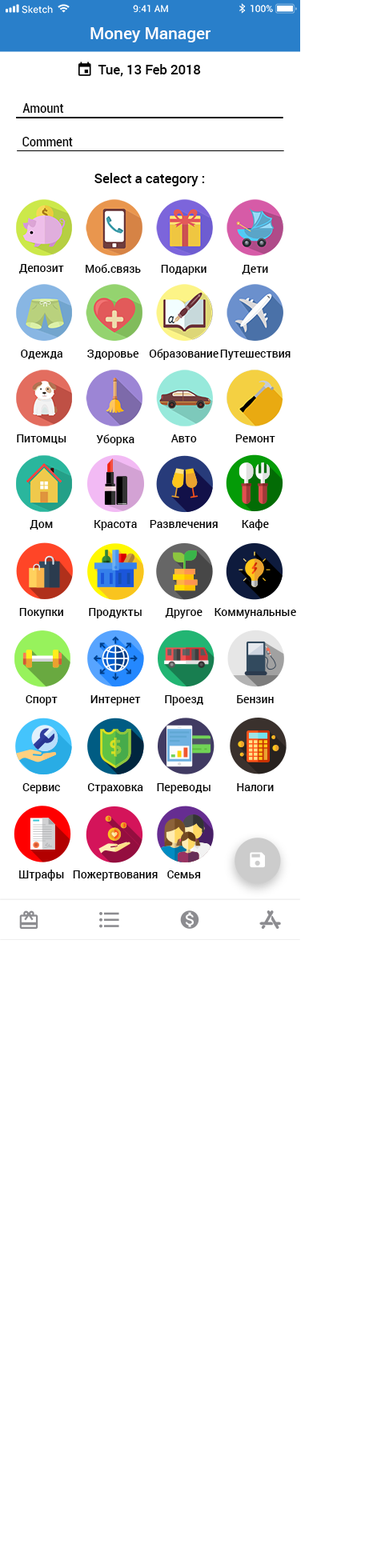
<style>
.page{position:relative;width:381px;height:1568px;background:#ffffff}
.page>*{position:absolute;margin:0}
.t1{font:16.7px "Roboto-Medium";color:#ffffff}
.t2{font:13.3px "Roboto-Medium";color:#000000}
.t3{font:13.3px "Roboto-Condensed";color:#000000}
.t4{font:11.2px "Roboto-Medium";color:#000000}
</style>
<div class="page">
<p class="t1" style="left:90px;top:27px;width:121px;height:15px">Money Manager</p>
<p class="t2" style="left:98px;top:64px;width:103px;height:13px">Тue, 13 Feb 2018</p>
<p class="t3" style="left:22px;top:103px;width:42px;height:10px">Amount</p>
<p class="t3" style="left:22px;top:137px;width:51px;height:9px">Comment</p>
<p class="t2" style="left:94px;top:173px;width:111px;height:13px">Select a category :</p>
<p class="t4" style="left:18px;top:264px;width:46px;height:10px">Депозит</p>
<p class="t4" style="left:86px;top:264px;width:55px;height:9px">Моб.связь</p>
<p class="t4" style="left:161px;top:265px;width:45px;height:10px">Подарки</p>
<p class="t4" style="left:242px;top:265px;width:26px;height:9px">Дети</p>
<p class="t4" style="left:21px;top:350px;width:41px;height:9px">Одежда</p>
<p class="t4" style="left:87px;top:350px;width:52px;height:10px">Здоровье</p>
<p class="t4" style="left:149px;top:349px;width:69px;height:11px">Образование</p>
<p class="t4" style="left:220px;top:350px;width:70px;height:10px">Путешествия</p>
<p class="t4" style="left:17px;top:434px;width:49px;height:10px">Питомцы</p>
<p class="t4" style="left:96px;top:434px;width:38px;height:12px">Уборка</p>
<p class="t4" style="left:170px;top:434px;width:27px;height:8px">Авто</p>
<p class="t4" style="left:235px;top:434px;width:40px;height:8px">Ремонт</p>
<p class="t4" style="left:30px;top:520px;width:23px;height:10px">Дом</p>
<p class="t4" style="left:94px;top:520px;width:43px;height:10px">Красота</p>
<p class="t4" style="left:150px;top:520px;width:68px;height:8px">Развлечения</p>
<p class="t4" style="left:242px;top:519px;width:27px;height:11px">Кафе</p>
<p class="t4" style="left:19px;top:608px;width:44px;height:10px">Покупки</p>
<p class="t4" style="left:89px;top:608px;width:53px;height:10px">Продукты</p>
<p class="t4" style="left:165px;top:608px;width:37px;height:10px">Другое</p>
<p class="t4" style="left:214px;top:608px;width:82px;height:10px">Коммунальные</p>
<p class="t4" style="left:26px;top:695px;width:32px;height:11px">Спорт</p>
<p class="t4" style="left:90px;top:695px;width:51px;height:11px">Интернет</p>
<p class="t4" style="left:165px;top:695px;width:38px;height:11px">Проезд</p>
<p class="t4" style="left:237px;top:695px;width:37px;height:8px">Бензин</p>
<p class="t4" style="left:22px;top:783px;width:38px;height:11px">Сервис</p>
<p class="t4" style="left:87px;top:783px;width:56px;height:11px">Страховка</p>
<p class="t4" style="left:157px;top:783px;width:53px;height:11px">Переводы</p>
<p class="t4" style="left:237px;top:783px;width:37px;height:8px">Налоги</p>
<p class="t4" style="left:19px;top:870px;width:45px;height:11px">Штрафы</p>
<p class="t4" style="left:73px;top:870px;width:85px;height:11px">Пожертвования</p>
<p class="t4" style="left:167px;top:870px;width:34px;height:8px">Семья</p>
</div>
